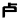
<style>
.page{position:relative;width:20px;height:20px;background:#ffffff}
.page>*{position:absolute;margin:0}
.t1{font:16px "¹ã½Ý¾ÓÃÔÄã×Ö¿â";color:#000000}
</style>
<div class="page">
<p class="t1" style="left:2px;top:2px;width:16px;height:16px">卢</p>
</div>
